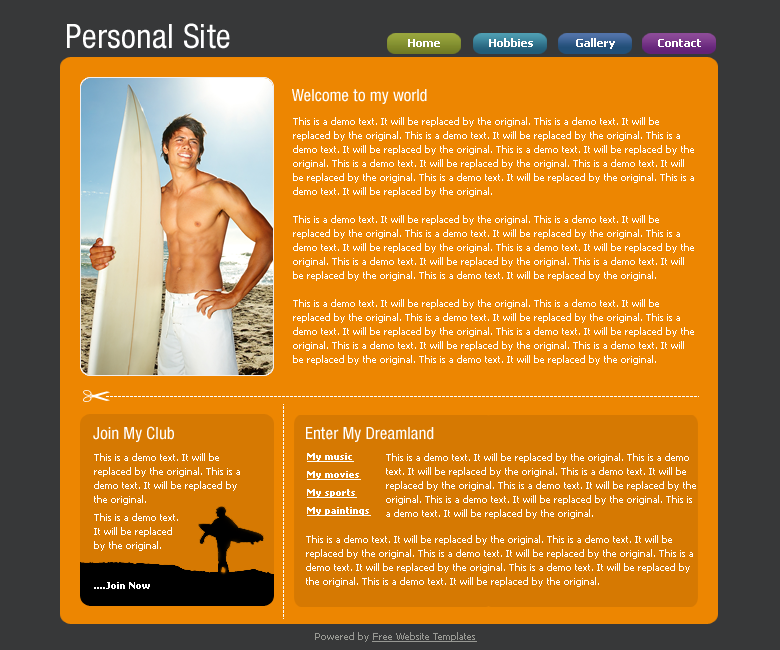
<style>
.page{position:relative;width:780px;height:650px;background:#ed8601}
.page>*{position:absolute;margin:0}
.t1{font:36px "KebleCondensed";color:#ffffff}
.t2{font:11px "Tahoma-Bold";color:#ffffff}
.t3{font:18px "KebleCondensed";color:#ffffff}
.t4{font:10px/14px "Tahoma";color:#ffffff}
.t5{font:10px/18px "Tahoma-Bold";color:#ffffff;text-decoration:underline}
.t6{font:10px "Tahoma-Bold";color:#ffffff}
.t7{font:10px "Tahoma";color:#989994;text-decoration:underline}
.t8{font:10px "Tahoma";color:#989994}
</style>
<div class="page">
<p class="t1" style="left:67px;top:23px;width:163px;height:26px">Personal Site</p>
<p class="t2" style="left:408px;top:38px;width:293px;height:11px">Home                Hobbies              Gallery              Contact</p>
<p class="t3" style="left:292px;top:89px;width:135px;height:15px">Welcome to my world</p>
<p class="t4" style="left:293px;top:117px;width:401px;height:248px">This is a demo text. It will be replaced by the original. This is a demo text. It will be replaced by the original. This is a demo text. It will be replaced by the original. This is a demo text. It will be replaced by the original. This is a demo text. It will be replaced by the original. This is a demo text. It will be replaced by the original. This is a demo text. It will be replaced by the original. This is a demo text. It will be replaced by the original. This is a demo text. It will be replaced by the original. <br><br>This is a demo text. It will be replaced by the original. This is a demo text. It will be replaced by the original. This is a demo text. It will be replaced by the original. This is a demo text. It will be replaced by the original. This is a demo text. It will be replaced by the original. This is a demo text. It will be replaced by the original. This is a demo text. It will be replaced by the original. This is a demo text. It will be replaced by the original.<br><br>This is a demo text. It will be replaced by the original. This is a demo text. It will be replaced by the original. This is a demo text. It will be replaced by the original. This is a demo text. It will be replaced by the original. This is a demo text. It will be replaced by the original. This is a demo text. It will be replaced by the original. This is a demo text. It will be replaced by the original. This is a demo text. It will be replaced by the original.</p>
<p class="t3" style="left:93px;top:426px;width:81px;height:16px">Join My Club</p>
<p class="t3" style="left:306px;top:427px;width:128px;height:15px">Enter My Dreamland</p>
<p class="t4" style="left:94px;top:453px;width:146px;height:52px">This is a demo text. It will be replaced by the original. This is a demo text. It will be replaced by the original.</p>
<p class="t5" style="left:307px;top:453px;width:64px;height:63px">My music<br>My movies<br>My sports<br>My paintings</p>
<p class="t4" style="left:386px;top:453px;width:310px;height:66px">This is a demo text. It will be replaced by the original. This is a demo text. It will be replaced by the original. This is a demo text. It will be replaced by the original. This is a demo text. It will be replaced by the original. This is a demo text. It will be replaced by the original. This is a demo text. It will be replaced by the original.</p>
<p class="t4" style="left:94px;top:513px;width:84px;height:38px">This is a demo text. It will be replaced by the original.</p>
<p class="t4" style="left:306px;top:535px;width:387px;height:52px">This is a demo text. It will be replaced by the original. This is a demo text. It will be replaced by the original. This is a demo text. It will be replaced by the original. This is a demo text. It will be replaced by the original. This is a demo text. It will be replaced by the original. This is a demo text. It will be replaced by the original.</p>
<p class="t6" style="left:94px;top:582px;width:56px;height:7px">....Join Now</p>
<p class="t7" style="left:315px;top:632px;width:162px;height:10px"><span class="t8">Powered by </span>Free Website Templates</p>
</div>
